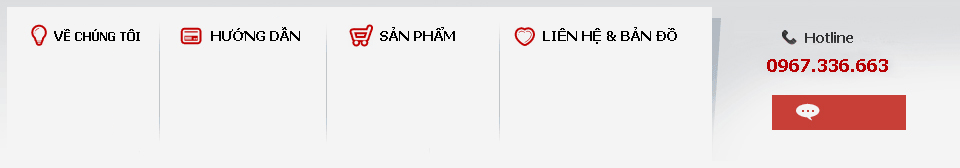
<style>
.page{position:relative;width:960px;height:168px;background:#f4f4f4}
.page>*{position:absolute;margin:0}
.t1{font:12px "Tahoma-Bold";color:#000000}
.t2{font:14px "Tahoma-Bold";color:#000000}
</style>
<div class="page">
<p class="t1" style="left:54px;top:29px;width:86px;height:12px"><span class="t2">V</span>Ề CHÚNG TÔI</p>
<p class="t2" style="left:211px;top:27px;width:89px;height:14px">HƯỚNG DẪN</p>
<p class="t2" style="left:380px;top:27px;width:75px;height:14px">SẢN PHẨM</p>
<p class="t2" style="left:543px;top:27px;width:134px;height:17px">LIÊN HỆ &amp; BẢN ĐỒ</p>
</div>
